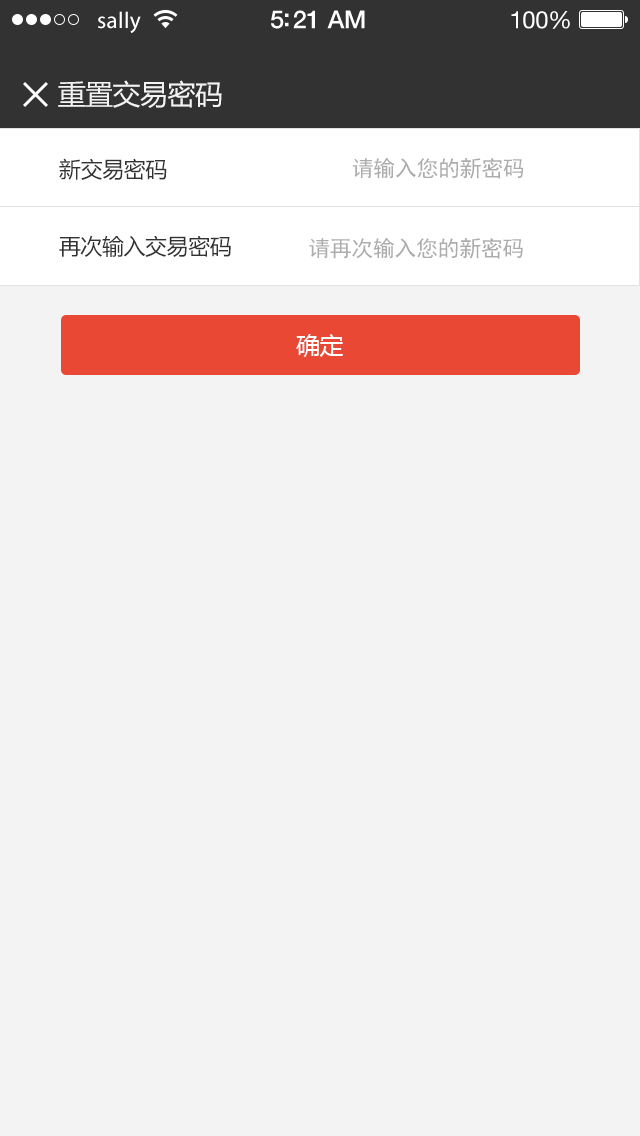
<style>
.page{position:relative;width:640px;height:1136px;background:#f3f3f3}
.page>*{position:absolute;margin:0}
.t1{font:23px "MyriadPro-Regular";letter-spacing:0.02em;color:#ffffff}
.t2{font:25px "HelveticaNeue-Medium";letter-spacing:-0.02em;color:#ffffff}
.t3{font:24px "HelveticaNeue";letter-spacing:-0.02em;color:#ffffff}
.t4{font:28px "MicrosoftYaHei";letter-spacing:-0.02em;color:#f3f3f3}
.t5{font:22px "MicrosoftYaHei";letter-spacing:-0.02em;color:#323232}
.t6{font:22px "SimHei";letter-spacing:-0.02em;color:#acacac}
.t7{font:24px "MicrosoftYaHei";letter-spacing:-0.02em;color:#ffffff}
</style>
<div class="page">
<p class="t1" style="left:98px;top:11px;width:43px;height:22px">sally</p>
<p class="t2" style="left:271px;top:10px;width:94px;height:19px">5:21 AM</p>
<p class="t3" style="left:511px;top:11px;width:59px;height:18px">100%</p>
<p class="t4" style="left:58px;top:80px;width:164px;height:28px">重置交易密码</p>
<p class="t5" style="left:59px;top:158px;width:108px;height:22px">新交易密码</p>
<p class="t6" style="left:352px;top:157px;width:172px;height:22px">请输入您的新密码</p>
<p class="t5" style="left:59px;top:235px;width:172px;height:22px">再次输入交易密码</p>
<p class="t6" style="left:309px;top:237px;width:214px;height:22px">请再次输入您的新密码</p>
<p class="t7" style="left:296px;top:334px;width:47px;height:23px">确定</p>
</div>
